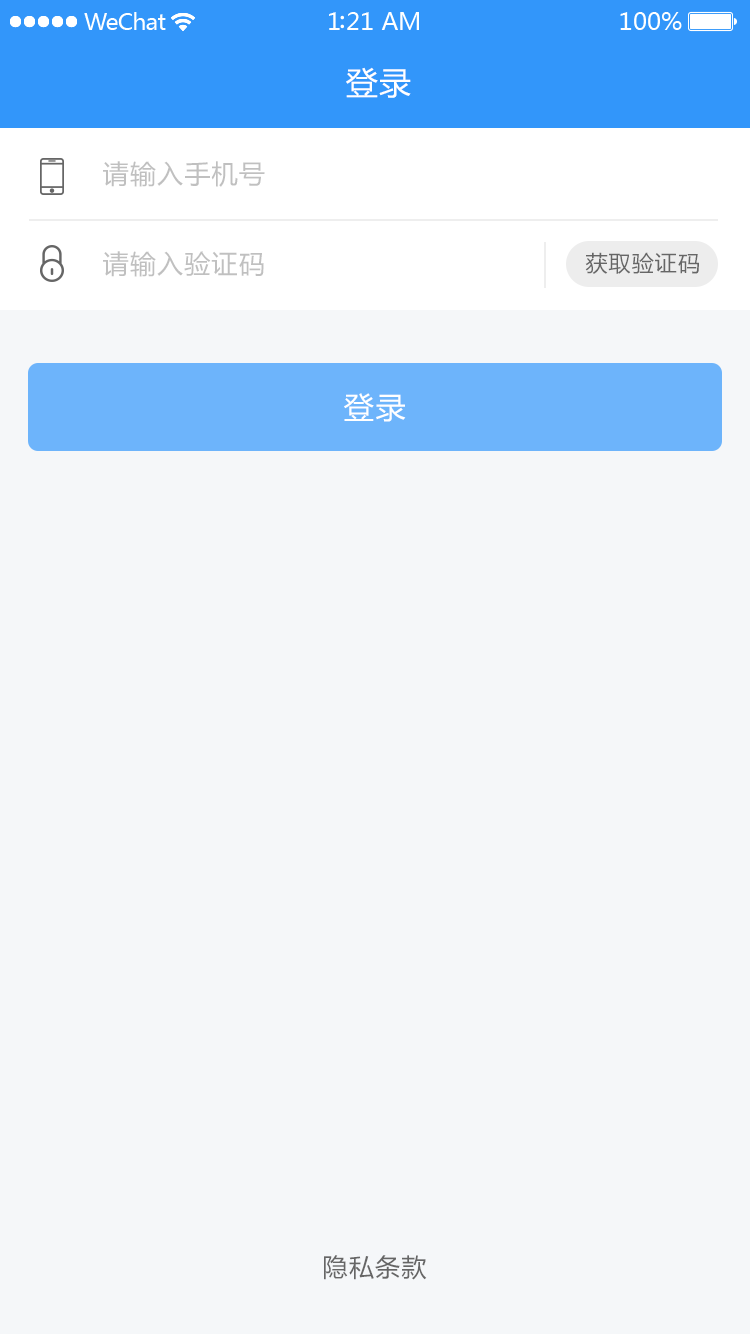
<style>
.page{position:relative;width:750px;height:1334px;background:#f5f7f9}
.page>*{position:absolute;margin:0}
.t1{font:32px "MicrosoftYaHei";letter-spacing:0.025em;color:#ffffff}
.t2{font:26px "MicrosoftYaHei";letter-spacing:0.05em;color:#c0c0c0}
.t3{font:22px "MicrosoftYaHei";letter-spacing:0.05em;color:#666666}
.t4{font:30px "MicrosoftYaHei";letter-spacing:0.05em;color:#ffffff}
.t5{font:25px "MicrosoftYaHei";letter-spacing:0.05em;color:#666666}
</style>
<div class="page">
<p class="t1" style="left:346px;top:67px;width:65px;height:31px">登录</p>
<p class="t2" style="left:103px;top:161px;width:162px;height:26px">请输入手机号</p>
<p class="t2" style="left:103px;top:251px;width:161px;height:26px">请输入验证码</p>
<p class="t3" style="left:585px;top:252px;width:114px;height:22px">获取验证码</p>
<p class="t4" style="left:344px;top:393px;width:62px;height:29px">登录</p>
<p class="t5" style="left:324px;top:1255px;width:103px;height:25px">隐私条款</p>
</div>
